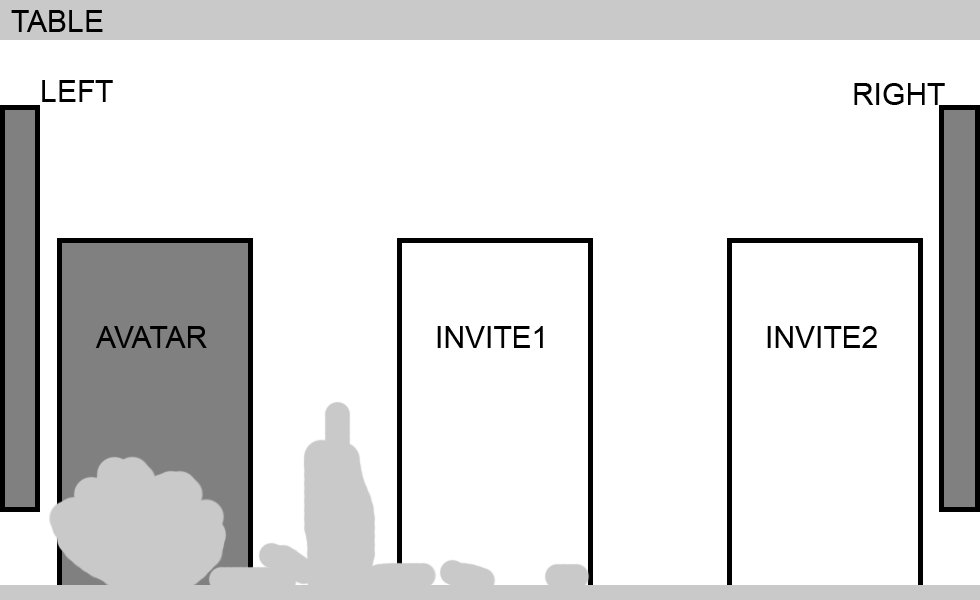
<style>
.page{position:relative;width:980px;height:600px;background:#ffffff}
.page>*{position:absolute;margin:0}
.t1{font:30px "ArialMT";color:#000000}
</style>
<div class="page">
<p class="t1" style="left:11px;top:10px;width:92px;height:22px">TABLE</p>
<p class="t1" style="left:42px;top:80px;width:71px;height:22px">LEFT</p>
<p class="t1" style="left:854px;top:83px;width:91px;height:22px">RIGHT</p>
<p class="t1" style="left:95px;top:326px;width:112px;height:22px">AVATAR</p>
<p class="t1" style="left:437px;top:326px;width:106px;height:22px">INVITE1</p>
<p class="t1" style="left:767px;top:326px;width:110px;height:22px">INVITE2</p>
</div>
